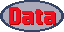
<style>
.page{position:relative;width:64px;height:32px;background:#aaaabb}
.page>*{position:absolute;margin:0}
.t1{font:30px "MotionControl-Bold";color:#ee1122}
</style>
<div class="page">
<p class="t1" style="left:9px;top:7px;width:46px;height:17px">Data</p>
<p class="t1" style="left:10px;top:8px;width:46px;height:17px">Data</p>
</div>
